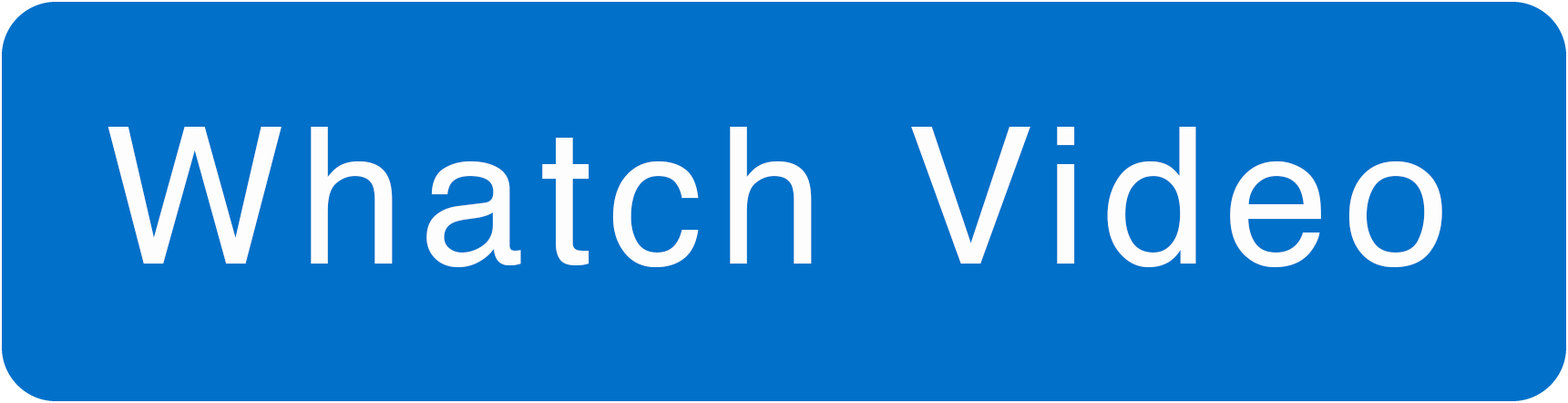
<style>
.page{position:relative;width:1568px;height:403px;background:#0070c9}
.page>*{position:absolute;margin:0}
.t1{font:189.8px "Helvetica";letter-spacing:0.08em;color:#fdfdfd}
</style>
<div class="page">
<p class="t1" style="left:108px;top:127px;width:1334px;height:140px">Whatch Video</p>
</div>
